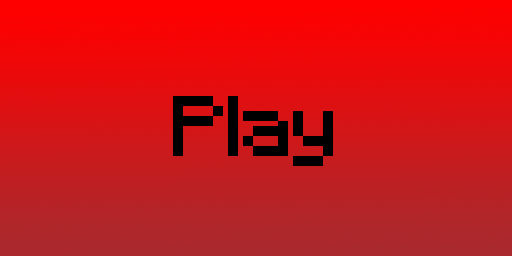
<style>
.page{position:relative;width:512px;height:256px}
.page>*{position:absolute;margin:0}
.t1{font:80px "Minecraft";color:#000000}
</style>
<div class="page">
<p class="t1" style="left:173px;top:96px;width:160px;height:70px">Play</p>
</div>
